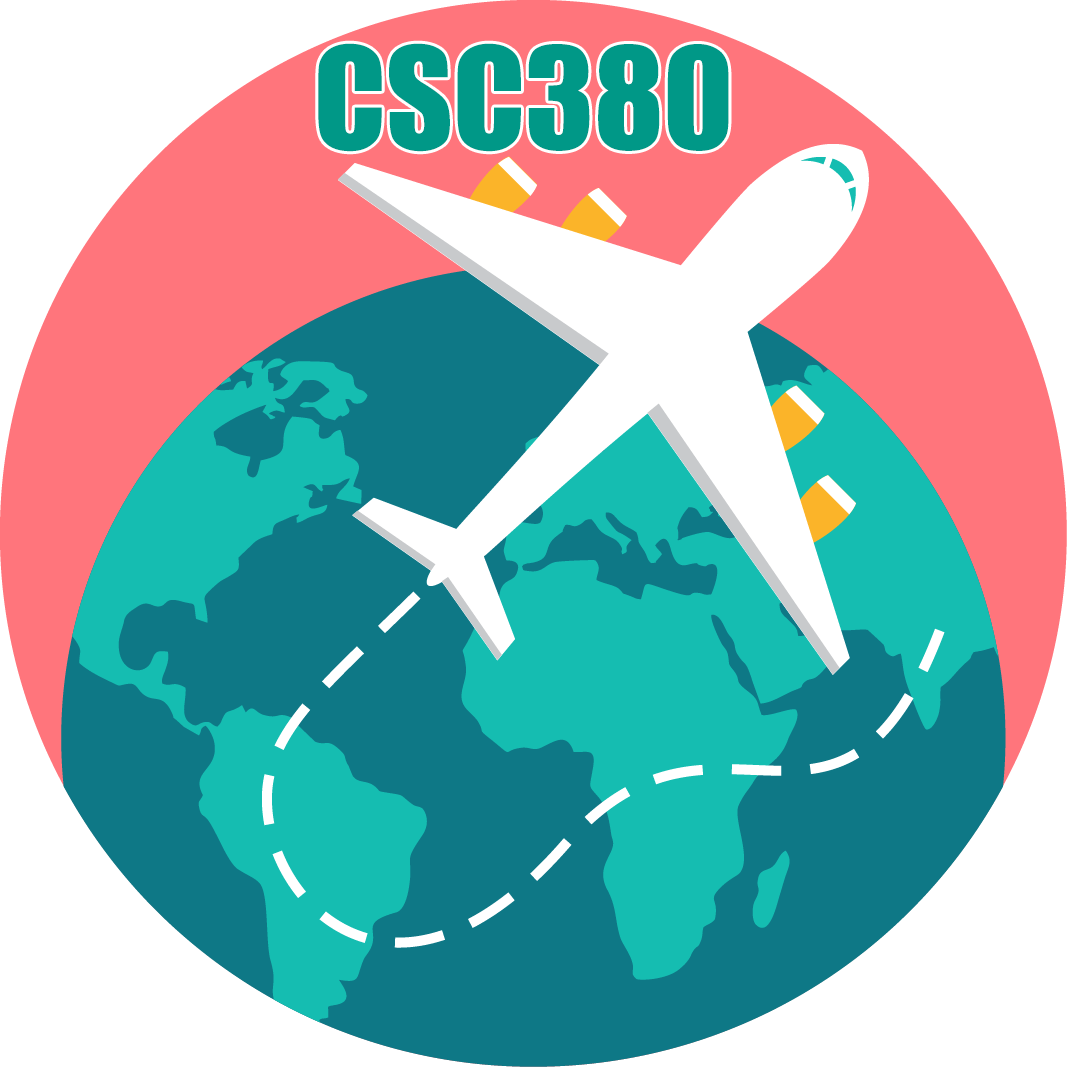
<style>
.page{position:relative;width:1067px;height:1067px;background:#ffffff}
.page>*{position:absolute;margin:0}
.t1{font:130px "Impact";color:#009887}
</style>
<div class="page">
<p class="t1" style="left:318px;top:43px;width:411px;height:109px">CSC380</p>
</div>
